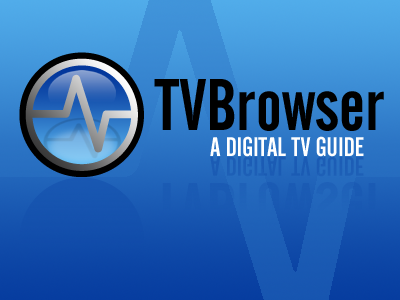
<style>
.page{position:relative;width:400px;height:300px}
.page>*{position:absolute;margin:0}
.t1{font:72.4px "AlternateGothicNo2BT-Regular";color:#000000}
.t2{font:26.5px "AlternateGothicNo2BT-Regular";color:#ffffff}
</style>
<div class="page">
<p class="t1" style="left:154px;top:79px;width:230px;height:52px">TVBrowser</p>
<p class="t2" style="left:210px;top:136px;width:154px;height:21px">A DIGITAL TV GUIDE</p>
</div>
